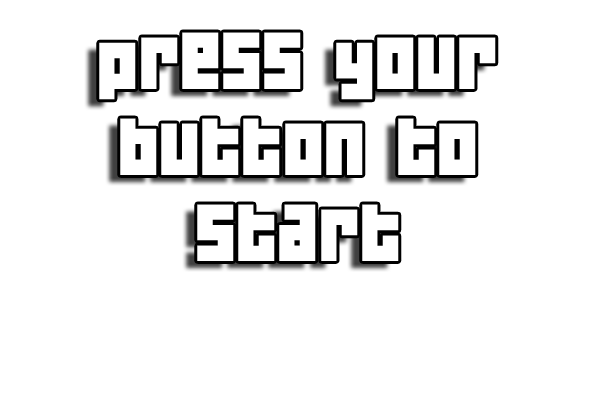
<style>
.page{position:relative;width:600px;height:400px;background:#ffffff}
.page>*{position:absolute;margin:0}
.t1{font:72px "04b19";color:#ffffff}
</style>
<div class="page">
<p class="t1" style="left:99px;top:32px;width:397px;height:229px;text-align:center">press your button to start</p>
</div>
